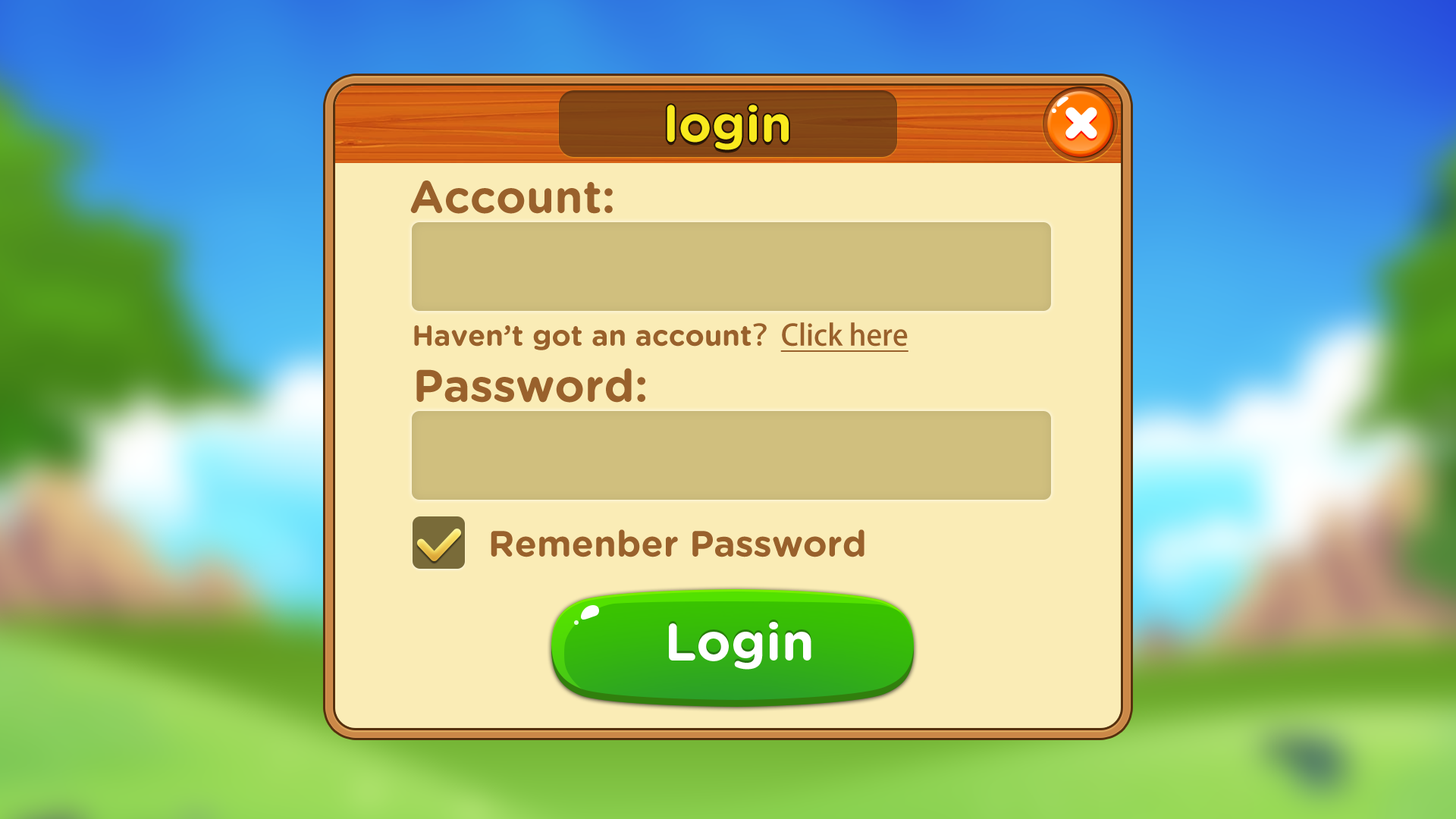
<style>
.page{position:relative;width:1456px;height:819px;background:#faecb6}
.page>*{position:absolute;margin:0}
.t1{font:50px "GothamRounded-Bold";color:#fff31e}
.t2{font:45.5px "GothamRounded-Bold";color:#99612c}
.t3{font:28.8px "GothamRounded-Bold";color:#99612c}
.t4{font:28.8px "AdobeHeitiStd-Regular";color:#99612c}
.t5{font:28.8px "AdobeHeitiStd-Regular";color:#99612c;text-decoration:underline}
.t6{font:36.4px "GothamRounded-Bold";color:#99612c}
.t7{font:52.5px "GothamRounded-Bold";letter-spacing:-0.025em;color:#ffffff}
</style>
<div class="page">
<p class="t1" style="left:667px;top:105px;width:122px;height:45px;opacity:0.95">login</p>
<p class="t2" style="left:410px;top:180px;width:203px;height:34px">Account:</p>
<p class="t3" style="left:414px;top:322px;width:494px;height:30px">Haven’t got an account<span class="t4">？</span><span class="t5">Click here</span></p>
<p class="t2" style="left:416px;top:368px;width:229px;height:35px">Password:</p>
<p class="t6" style="left:491px;top:529px;width:373px;height:28px">Remenber Password</p>
<p class="t7" style="left:669px;top:622px;width:142px;height:48px">Login</p>
</div>
